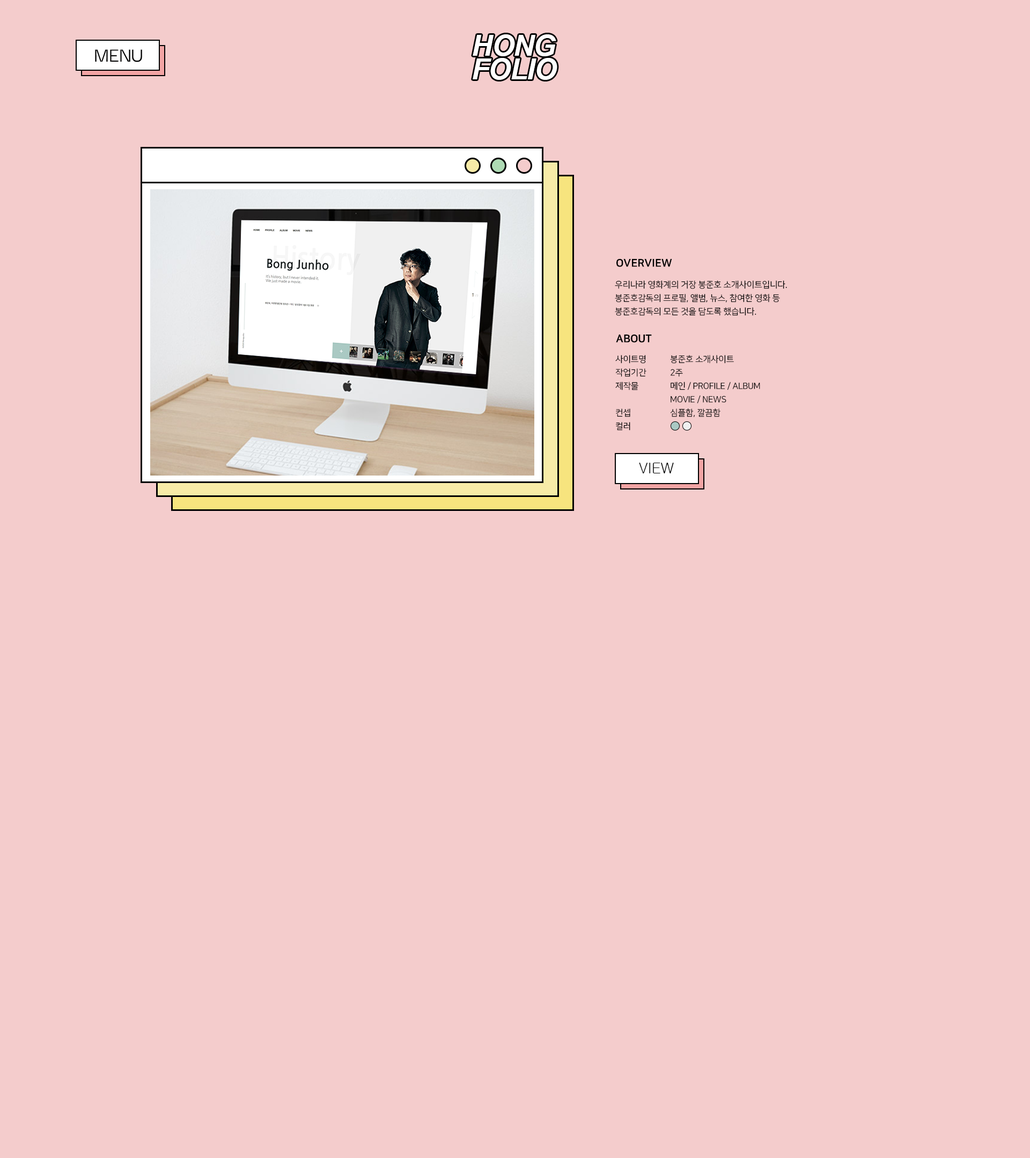
<style>
.page{position:relative;width:1030px;height:1158px;background:#f4cccc}
.page>*{position:absolute;margin:0}
.t1{font:28.8px/23.4px "Arial-BoldItalicMT";letter-spacing:-0.03em;color:#ffffff}
.t2{font:21.4px "DarkerGrotesque-Medium";letter-spacing:-0.01em;color:#000000}
.t3{font:10.7px "NanumSquareEB";letter-spacing:-0.01em;color:#000000}
.t4{font:8.6px/13.4px "NanumSquareR";letter-spacing:-0.01em;color:#000000}
.t5{font:14.9px "Gulim";letter-spacing:-0.01em;color:#000000}
</style>
<div class="page">
<p class="t1" style="left:472px;top:34px;width:85px;height:46px">HONG<br>FOLIO</p>
<p class="t2" style="left:95px;top:49px;width:47px;height:13px">MENU</p>
<p class="t3" style="left:616px;top:259px;width:56px;height:8px">OVERVIEW</p>
<p class="t4" style="left:615px;top:280px;width:172px;height:36px">우리나라 영화계의 거장 봉준호 소개사이트입니다.<br>봉준호감독의 프로필, 앨범, 뉴스, 참여한 영화 등 <br>봉준호감독의 모든 것을 담도록 했습니다.</p>
<p class="t3" style="left:616px;top:335px;width:36px;height:8px">ABOUT</p>
<p class="t4" style="left:615px;top:355px;width:31px;height:76px">사이트명<br>작업기간<br>제작물<br><br>컨셉<br>컬러</p>
<p class="t4" style="left:670px;top:355px;width:90px;height:62px">봉준호 소개사이트<br>2주<br>메인 / PROFILE / ALBUM<br>MOVIE / NEWS<br>심플함, 깔끔함</p>
<p class="t5" style="left:639px;top:463px;width:34px;height:10px">VIEW</p>
</div>
